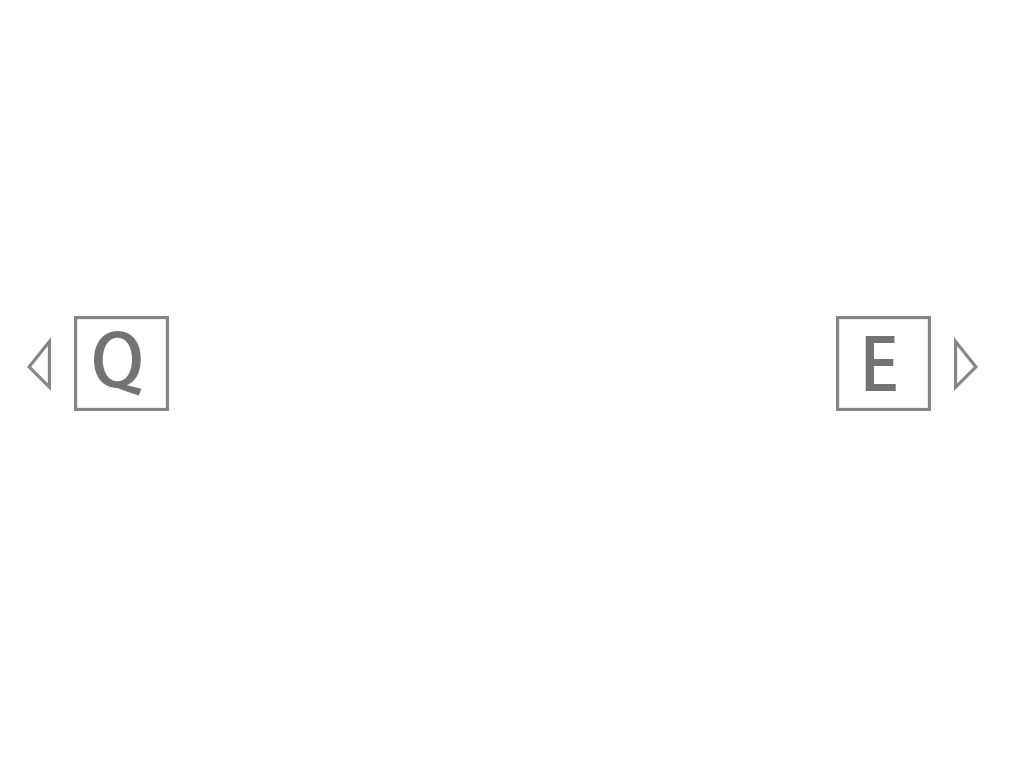
<style>
.page{position:relative;width:1024px;height:768px;background:#ffffff}
.page>*{position:absolute;margin:0}
.t1{font:72px "AdobeHeitiStd-Regular";letter-spacing:0.04em;color:#737373}
</style>
<div class="page">
<p class="t1" style="left:94px;top:331px;width:48px;height:65px">Q</p>
<p class="t1" style="left:865px;top:336px;width:31px;height:55px">E</p>
</div>
